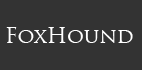
<style>
.page{position:relative;width:142px;height:70px;background:#333333}
.page>*{position:absolute;margin:0}
.t1{font:21px "TrajanPro-Regular";color:#ffffff}
</style>
<div class="page">
<p class="t1" style="left:6px;top:27px;width:127px;height:16px">FoxHound</p>
</div>
